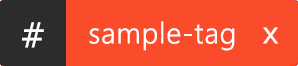
<style>
.page{position:relative;width:298px;height:66px;background:#fa4b2a}
.page>*{position:absolute;margin:0}
.t1{font:34px "Verdana";color:#ffffff;font-weight:bold}
.t2{font:29.2px "SegoeUI-Semilight";color:#ffffff;font-weight:bold}
.t3{font:34px "Corbel";color:#ffffff;font-weight:bold}
</style>
<div class="page">
<p class="t1" style="left:22px;top:22px;width:22px;height:26px">#</p>
<p class="t1" style="left:22px;top:22px;width:22px;height:26px">#</p>
<p class="t1" style="left:22px;top:22px;width:22px;height:26px">#</p>
<p class="t1" style="left:22px;top:22px;width:22px;height:26px">#</p>
<p class="t1" style="left:22px;top:22px;width:22px;height:26px">#</p>
<p class="t1" style="left:22px;top:22px;width:22px;height:26px">#</p>
<p class="t1" style="left:22px;top:22px;width:22px;height:26px">#</p>
<p class="t1" style="left:22px;top:22px;width:22px;height:26px">#</p>
<p class="t1" style="left:22px;top:22px;width:22px;height:26px">#</p>
<p class="t1" style="left:22px;top:22px;width:22px;height:26px">#</p>
<p class="t2" style="left:89px;top:21px;width:189px;height:30px">sample-tag   <span class="t3">x</span></p>
<p class="t2" style="left:89px;top:21px;width:189px;height:30px">sample-tag   <span class="t3">x</span></p>
<p class="t2" style="left:89px;top:21px;width:189px;height:30px">sample-tag   <span class="t3">x</span></p>
<p class="t2" style="left:89px;top:21px;width:189px;height:30px">sample-tag   <span class="t3">x</span></p>
<p class="t2" style="left:89px;top:21px;width:189px;height:30px">sample-tag   <span class="t3">x</span></p>
<p class="t2" style="left:89px;top:21px;width:189px;height:30px">sample-tag   <span class="t3">x</span></p>
<p class="t2" style="left:89px;top:21px;width:189px;height:30px">sample-tag   <span class="t3">x</span></p>
<p class="t2" style="left:89px;top:21px;width:189px;height:30px">sample-tag   <span class="t3">x</span></p>
<p class="t2" style="left:89px;top:21px;width:189px;height:30px">sample-tag   <span class="t3">x</span></p>
<p class="t2" style="left:89px;top:21px;width:189px;height:30px">sample-tag   <span class="t3">x</span></p>
</div>
